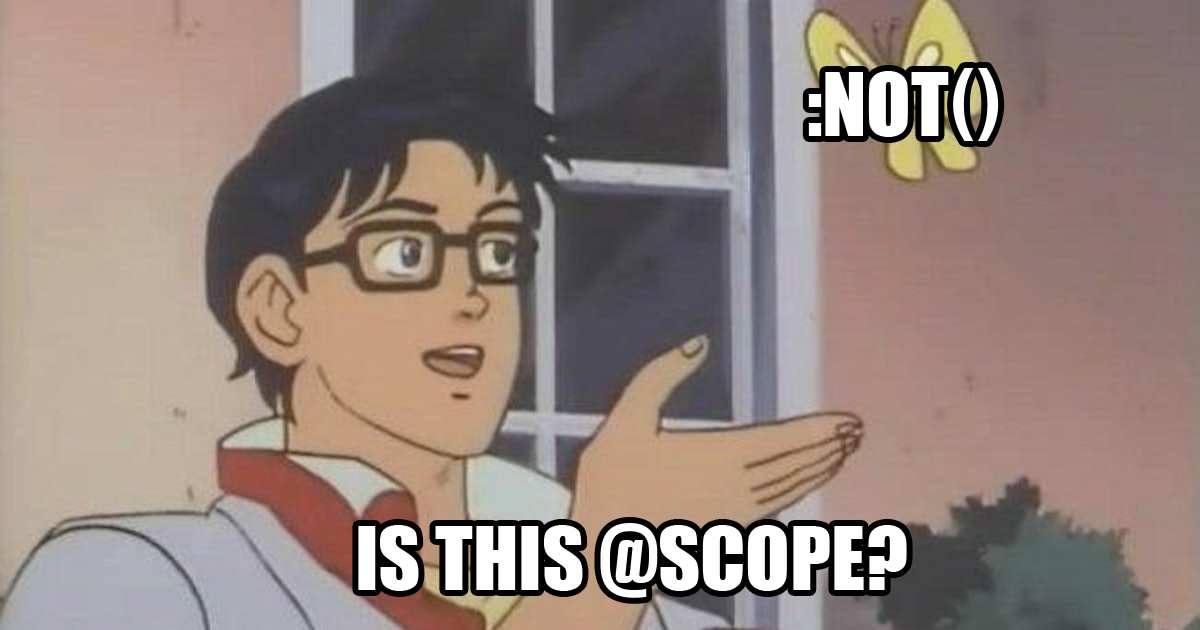
<style>
.page{position:relative;width:1200px;height:630px}
.page>*{position:absolute;margin:0}
.t1{font:81px "Impact";color:#ffffff;text-transform:uppercase}
.t2{font:81px "HelveticaNeue-CondensedBold";letter-spacing:0.06em;color:#ffffff;text-transform:uppercase}
.t3{font:100px "DharmaGothicE-Heavy";color:#ffffff;text-transform:uppercase}
</style>
<div class="page">
<p class="t1" style="left:808px;top:68px;width:191px;height:73px">:not<span class="t2">()</span></p>
<p class="t1" style="left:358px;top:523px;width:549px;height:75px">Is this <span class="t3">@</span>scope?</p>
</div>
